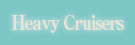
<style>
.page{position:relative;width:135px;height:45px;background:#7dc6c6}
.page>*{position:absolute;margin:0}
.t1{font:20px "RyuminPro-ExBold";letter-spacing:-0.08em;color:#f1e6d8;scale:0.9 1}
</style>
<div class="page">
<p class="t1" style="left:11px;top:15px;width:113px;height:18px">Heavy Cruisers</p>
</div>
